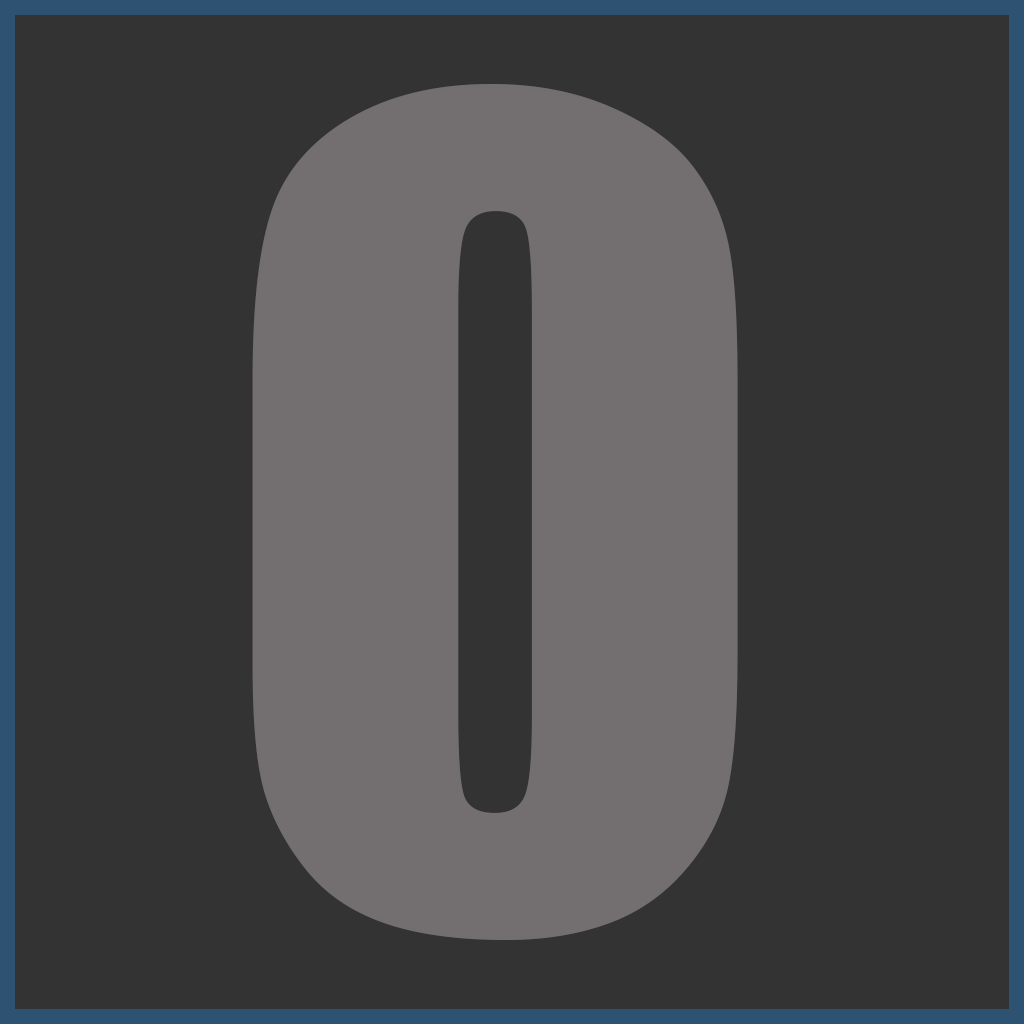
<style>
.page{position:relative;width:1024px;height:1024px;background:#333333}
.page>*{position:absolute;margin:0}
.t1{font:1041.7px "Impact";color:#736f70}
</style>
<div class="page">
<p class="t1" style="left:252px;top:84px;width:486px;height:856px">0</p>
</div>
